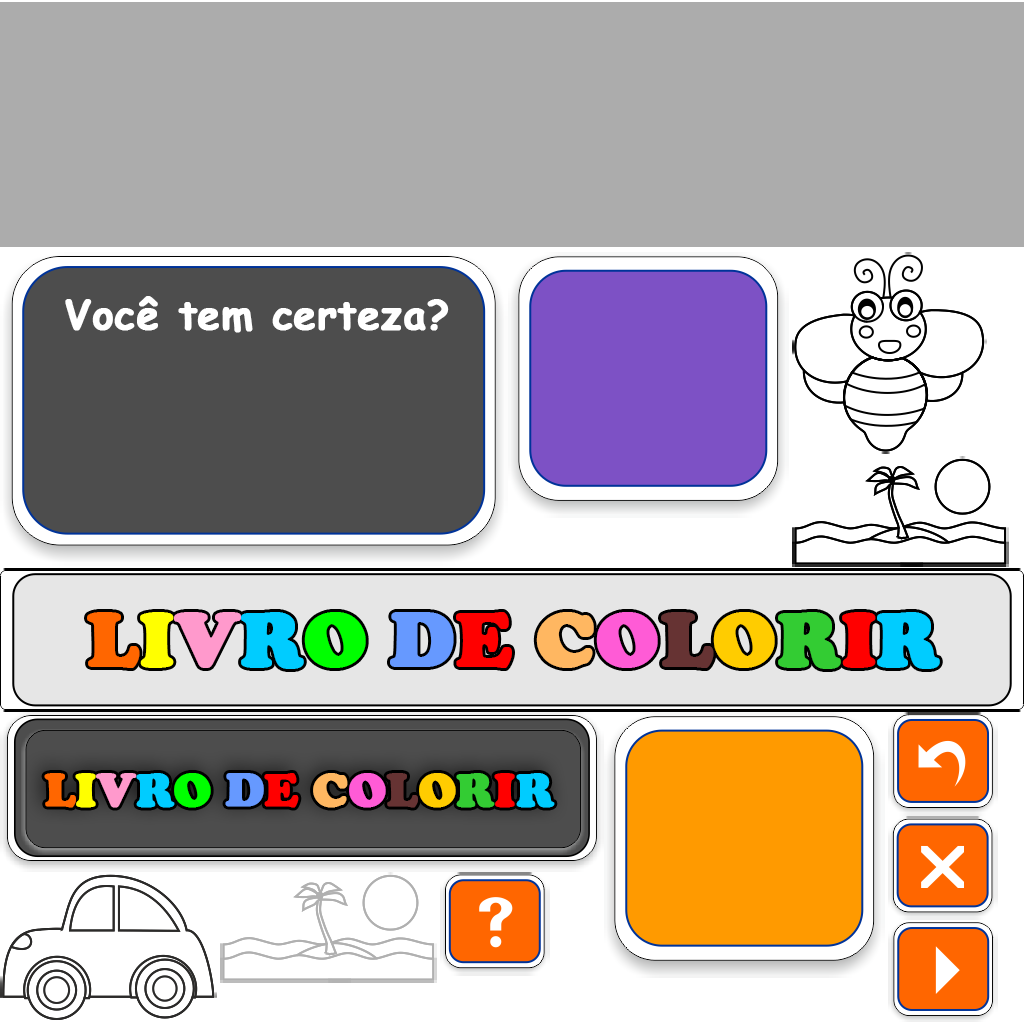
<style>
.page{position:relative;width:1024px;height:1024px;background:#ffffff}
.page>*{position:absolute;margin:0}
.t1{font:40px "ComicSansMS-Bold";color:#ffffff;font-weight:bold}
.t2{font:47.8px "CooperBlack";color:#ff6600;font-weight:bold}
.t3{font:47.8px "CooperBlack";color:#ffff00;font-weight:bold}
.t4{font:47.8px "CooperBlack";color:#ff99cc;font-weight:bold}
.t5{font:47.8px "CooperBlack";color:#00ccff;font-weight:bold}
.t6{font:47.8px "CooperBlack";color:#00ff00;font-weight:bold}
.t7{font:47.8px "CooperBlack";color:#6699ff;font-weight:bold}
.t8{font:47.8px "CooperBlack";color:#ff0000;font-weight:bold}
.t9{font:47.8px "CooperBlack";color:#ffb761;font-weight:bold}
.t10{font:47.8px "CooperBlack";color:#ff5bd6;font-weight:bold}
.t11{font:47.8px "CooperBlack";color:#663333;font-weight:bold}
.t12{font:47.8px "CooperBlack";color:#ffcc00;font-weight:bold}
.t13{font:47.8px "CooperBlack";color:#33cc33;font-weight:bold}
</style>
<div class="page">
<p class="t1" style="left:65px;top:296px;width:384px;height:37px">Você tem certeza?</p>
<p class="t2" style="left:44px;top:773px;width:511px;height:35px">L<span class="t3">I</span><span class="t4">V</span><span class="t5">R</span><span class="t6">O </span><span class="t7">D</span><span class="t8">E </span><span class="t9">C</span><span class="t10">O</span><span class="t11">L</span><span class="t12">O</span><span class="t13">R</span><span class="t8">I</span><span class="t5">R</span></p>
</div>
